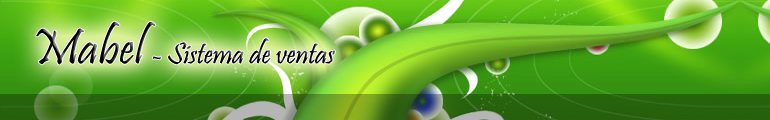
<style>
.page{position:relative;width:770px;height:120px}
.page>*{position:absolute;margin:0}
.t1{font:30.3px "Pristina-Regular";color:#030000}
.t2{font:50.6px "Pristina-Regular";color:#030000}
.t3{font:27.8px "Pristina-Regular";color:#030000}
</style>
<div class="page">
<p class="t1" style="left:36px;top:21px;width:299px;height:44px"><span class="t2">Mabel </span><span class="t3">- </span>Sistema de ventas</p>
</div>
